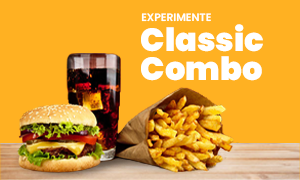
<style>
.page{position:relative;width:300px;height:180px;background:#ffb122}
.page>*{position:absolute;margin:0}
.t1{font:10.7px "Poppins-SemiBold";color:#ffffff}
.t2{font:32.2px/28.4px "Poppins-Black";color:#ffffff}
</style>
<div class="page">
<p class="t1" style="left:141px;top:13px;width:70px;height:9px">EXPERIMENTE</p>
<p class="t2" style="left:141px;top:24px;width:122px;height:57px">Classic<br>Combo</p>
</div>
